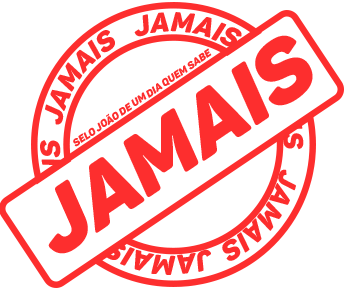
<style>
.page{position:relative;width:355px;height:295px;background:#ffffff}
.page>*{position:absolute;margin:0}
.t1{font:85.4px "Panton-BlackitalicCaps";color:#fd2e2e}
</style>
<div class="page">
<p class="t1" style="left:48px;top:35px;width:265px;height:219px;rotate:-34deg">jamais</p>
</div>
